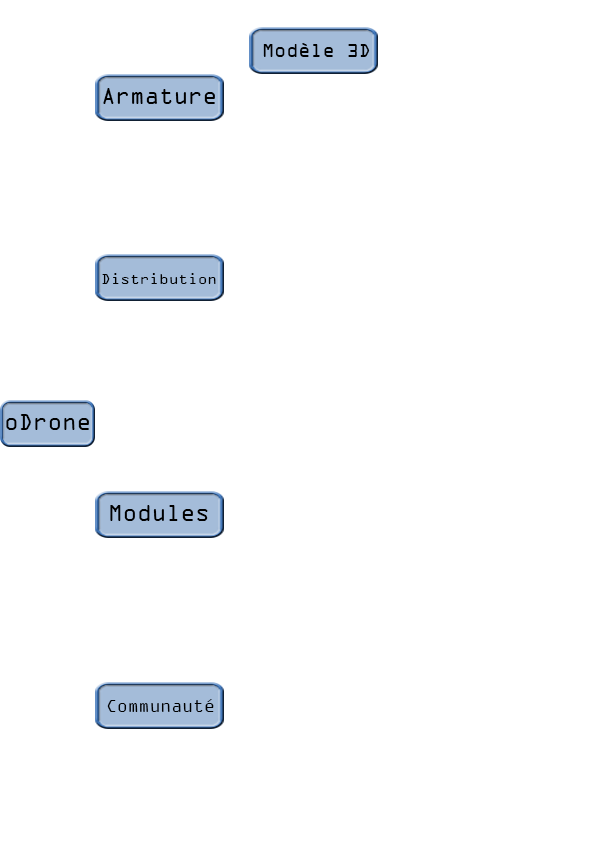
<style>
.page{position:relative;width:595px;height:842px;background:#ffffff}
.page>*{position:absolute;margin:0}
.t1{font:20px "OCRAExtended";color:#000000}
.t2{font:24px "OCRAExtended";color:#000000}
.t3{font:16px "OCRAExtended";color:#000000}
.t4{font:18px "OCRAExtended";color:#000000}
</style>
<div class="page">
<p class="t1" style="left:263px;top:43px;width:107px;height:14px">Modèle 3D</p>
<p class="t2" style="left:103px;top:88px;width:112px;height:16px">Armature</p>
<p class="t3" style="left:102px;top:273px;width:114px;height:11px">Distribution</p>
<p class="t2" style="left:6px;top:414px;width:83px;height:16px">oDrone</p>
<p class="t2" style="left:110px;top:505px;width:98px;height:16px">Modules</p>
<p class="t4" style="left:107px;top:699px;width:107px;height:13px">Communauté</p>
</div>
